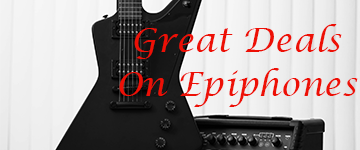
<style>
.page{position:relative;width:360px;height:150px}
.page>*{position:absolute;margin:0}
.t1{font:33.3px/44.4px "LucidaCalligraphy-Italic";color:#ed1006}
</style>
<div class="page">
<p class="t1" style="left:119px;top:24px;width:239px;height:83px;text-align:center">Great Deals<br>On Epiphones</p>
</div>
